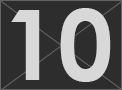
<style>
.page{position:relative;width:122px;height:90px;background:#2d2d2d}
.page>*{position:absolute;margin:0}
.t1{font:98.3px "CenturyGothic-Bold";color:#d8d8d8}
</style>
<div class="page">
<p class="t1" style="left:11px;top:8px;width:100px;height:74px">10</p>
</div>
